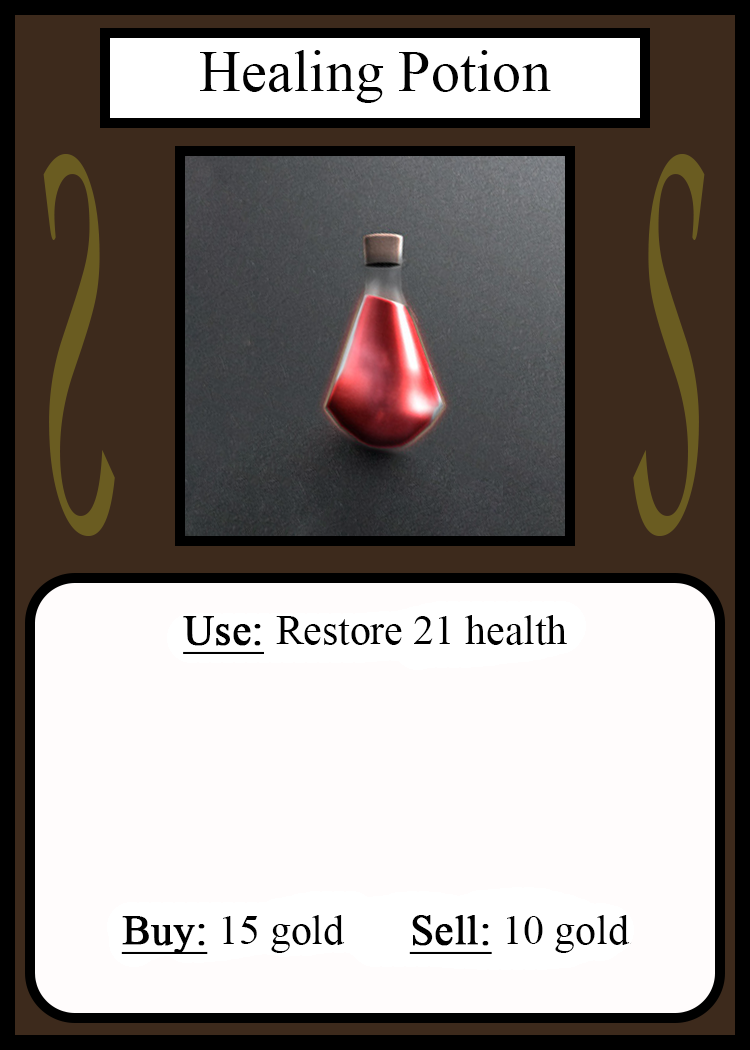
<style>
.page{position:relative;width:750px;height:1050px;background:#fffcfc}
.page>*{position:absolute;margin:0}
.t1{font:41.7px "TimesNewRomanPSMT";color:#000000}
.t2{font:41.7px "TimesNewRomanPSMT";color:#000000;font-weight:bold;text-decoration:underline}
</style>
<div class="page">
<p class="t1" style="left:121px;top:615px;width:509px;height:339px;text-align:center"><span class="t2">Use: </span>Restore 21 health<br><br><br><br><br><br><span class="t2">Buy:</span> 15 gold   <span class="t2">Sell:</span> 10 gold</p>
</div>
